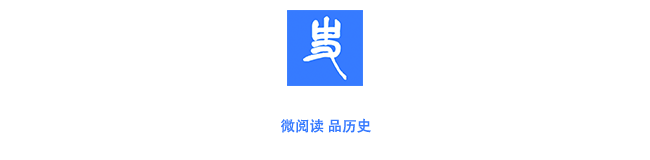
<style>
.page{position:relative;width:650px;height:160px;background:#ffffff}
.page>*{position:absolute;margin:0}
.t1{font:14.6px "AdobeHeitiStd-Regular";color:#367aff}
</style>
<div class="page">
<p class="t1" style="left:281px;top:118px;width:90px;height:15px">微阅读 品历史</p>
</div>
